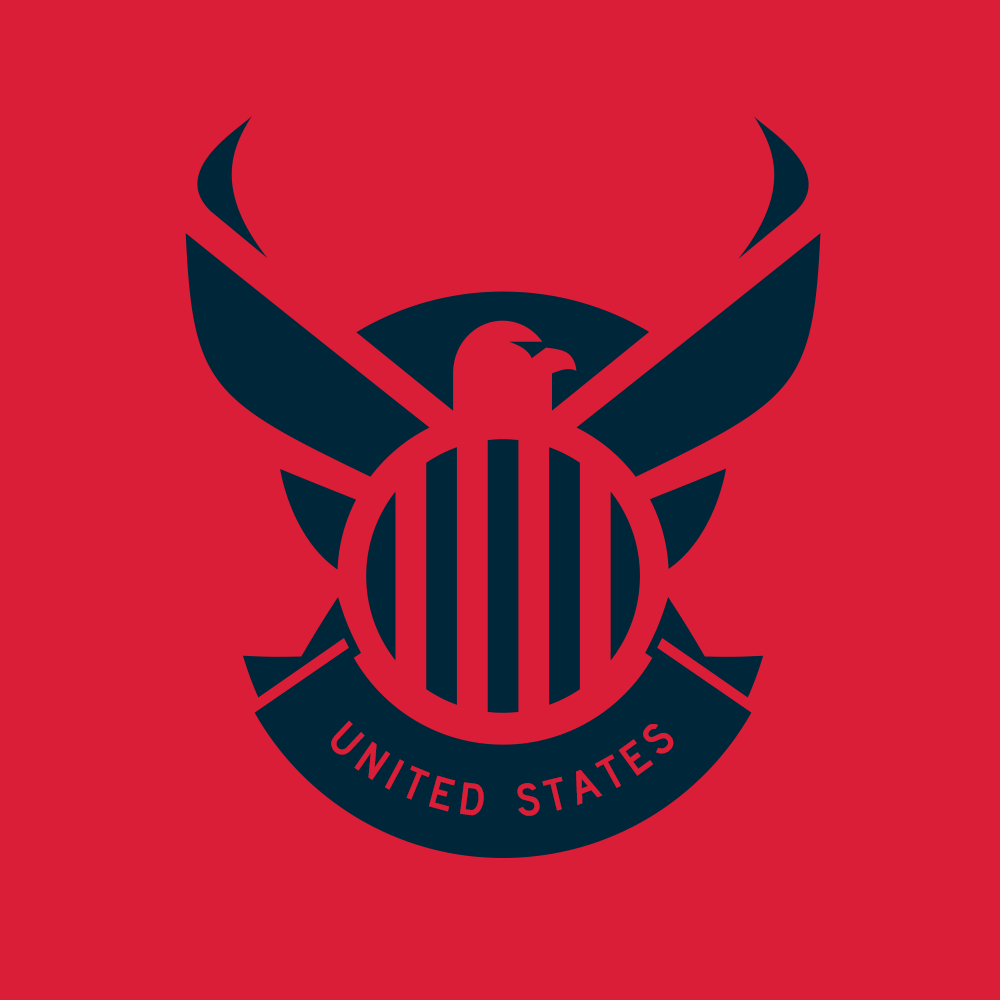
<style>
.page{position:relative;width:1000px;height:1000px;background:#db1e37}
.page>*{position:absolute;margin:0}
.t1{font:55.5px/19.5px "Roadgeek2014SeriesD";letter-spacing:0.125em;color:#db1e37}
</style>
<div class="page">
<p class="t1" style="left:331px;top:720px;width:343px;height:96px;text-align:center">UNITED STATES</p>
</div>
